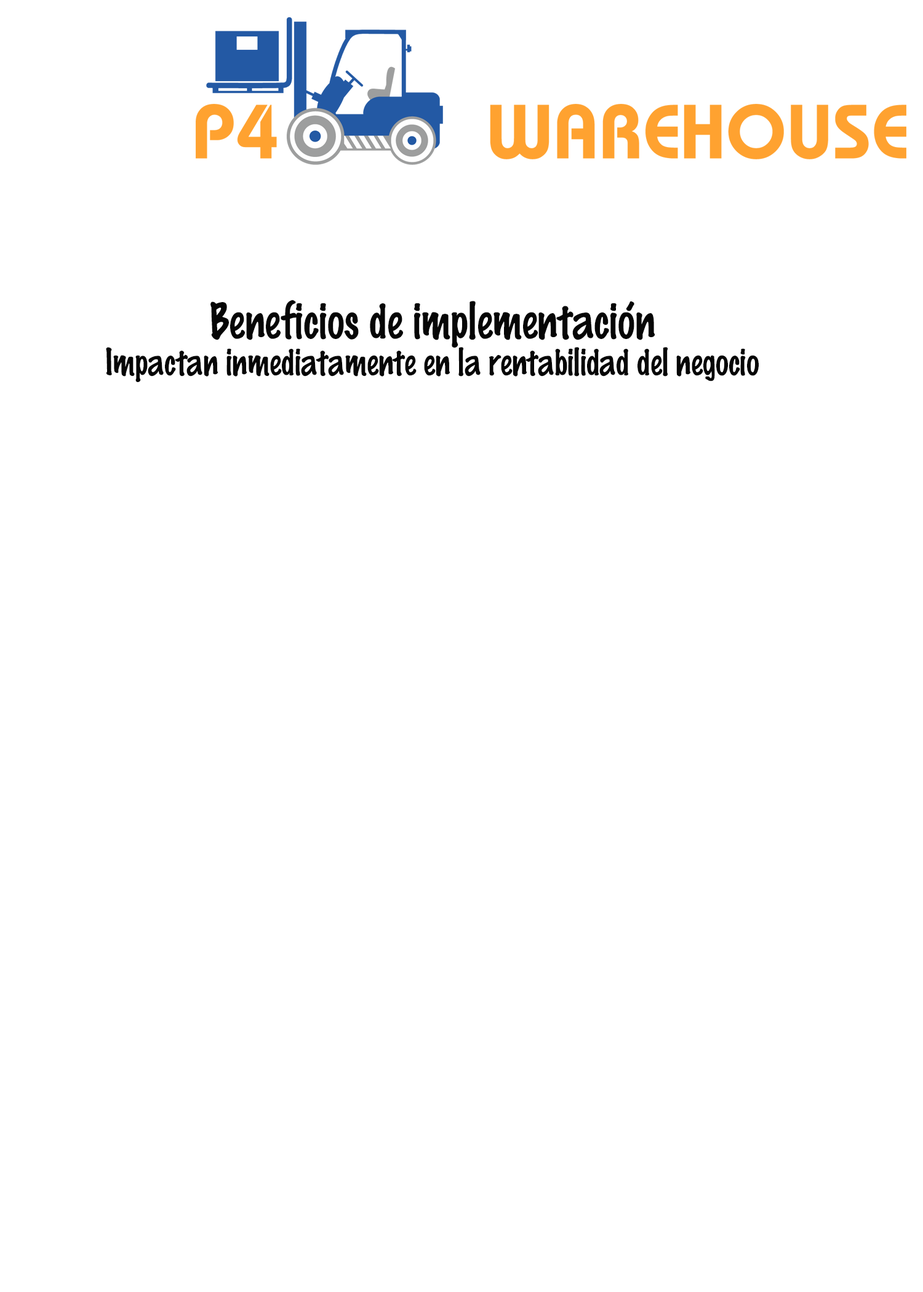
<style>
.page{position:relative;width:923px;height:1292px;background:#ffffff}
.page>*{position:absolute;margin:0}
.t1{font:33.8px "MarkerFelt";color:#060606;scale:0.91 1}
.t2{font:45.1px "MarkerFelt";color:#060606;scale:0.91 1}
</style>
<div class="page">
<p class="t1" style="left:106px;top:300px;width:653px;height:82px;text-align:center"><span class="t2">Beneficios de implementación<br></span>Impactan inmediatamente en la rentabilidad del negocio</p>
</div>
